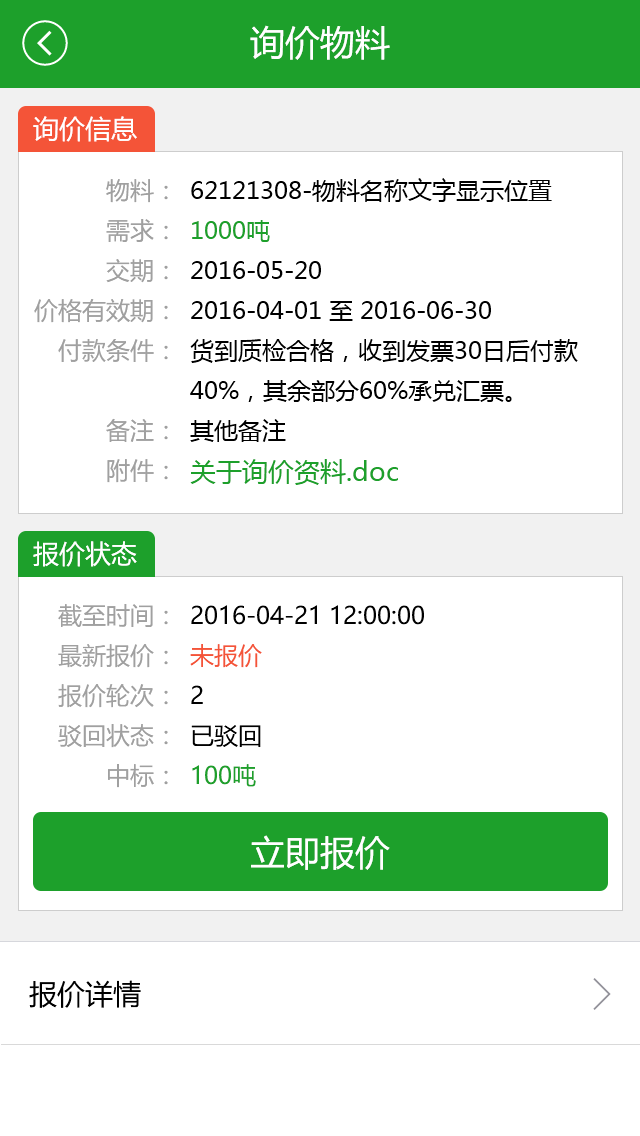
<style>
.page{position:relative;width:640px;height:1136px;background:#ffffff}
.page>*{position:absolute;margin:0}
.t1{font:35px "MicrosoftYaHei";color:#ffffff}
.t2{font:26px "MicrosoftYaHei";color:#ffffff}
.t3{font:24px/40px "MicrosoftYaHei";color:#a0a0a0}
.t4{font:24px/40px "MicrosoftYaHei";color:#000000}
.t5{font:24px/40px "MicrosoftYaHei";color:#1da02b}
.t6{font:26px/35px "MicrosoftYaHei";color:#1da02b}
.t7{font:24px/40px "MicrosoftYaHei";color:#f45438}
.t8{font:28px "MicrosoftYaHei";color:#000000}
</style>
<div class="page">
<p class="t1" style="left:250px;top:25px;width:140px;height:35px">询价物料</p>
<p class="t2" style="left:33px;top:116px;width:104px;height:26px">询价信息</p>
<p class="t3" style="left:34px;top:179px;width:134px;height:304px;text-align:right">物料：<br>需求：<br>交期：<br>价格有效期：<br>付款条件：<br><br>备注：<br>附件：</p>
<p class="t4" style="left:190px;top:178px;width:388px;height:307px">62121308-物料名称文字显示位置<br><span class="t5">1000吨<br></span>2016-05-20<br>2016-04-01 至 2016-06-30<br>货到质检合格，收到发票30日后付款<br>40%，其余部分60%承兑汇票。<br>其他备注<br><span class="t6">关于询价资料.doc</span></p>
<p class="t2" style="left:33px;top:541px;width:104px;height:26px">报价状态</p>
<p class="t3" style="left:58px;top:604px;width:110px;height:184px;text-align:right">截至时间：<br>最新报价：<br>报价轮次：<br>驳回状态：<br>中标：</p>
<p class="t4" style="left:190px;top:605px;width:234px;height:182px">2016-04-21 12:00:00<br><span class="t7">未报价<br></span>2<br>已驳回<br><span class="t5">100吨</span></p>
<p class="t1" style="left:251px;top:835px;width:139px;height:35px">立即报价</p>
<p class="t8" style="left:29px;top:980px;width:112px;height:28px">报价详情</p>
</div>
